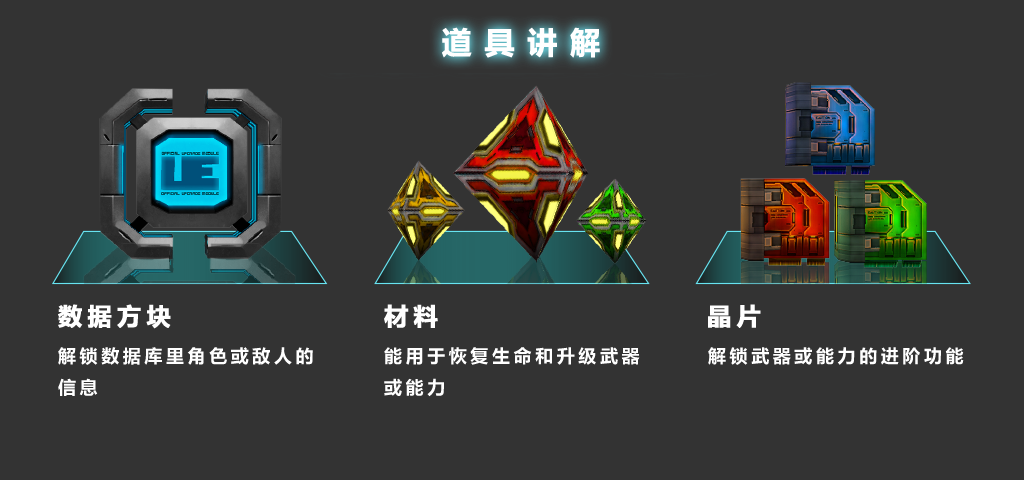
<style>
.page{position:relative;width:1024px;height:480px;background:#333333}
.page>*{position:absolute;margin:0}
.t1{font:30px "MicrosoftYaHei-Bold";letter-spacing:0.4em;color:#ffffff;font-weight:bold}
.t2{font:24px "MicrosoftYaHei-Bold";letter-spacing:0.2em;color:#ffffff;font-weight:bold}
.t3{font:18px "MicrosoftYaHei-Bold";letter-spacing:0.2em;color:#ffffff}
</style>
<div class="page">
<p class="t1" style="left:442px;top:27px;width:158px;height:31px">道具讲解</p>
<p class="t2" style="left:58px;top:304px;width:113px;height:25px">数据方块</p>
<p class="t2" style="left:384px;top:304px;width:54px;height:24px">材料</p>
<p class="t2" style="left:708px;top:304px;width:53px;height:24px">晶片</p>
<p class="t3" style="left:58px;top:347px;width:255px;height:49px">解锁数据库里角色或敌人的<br>信息</p>
<p class="t3" style="left:384px;top:347px;width:256px;height:50px">能用于恢复生命和升级武器<br>或能力</p>
<p class="t3" style="left:708px;top:347px;width:256px;height:18px">解锁武器或能力的进阶功能</p>
</div>
